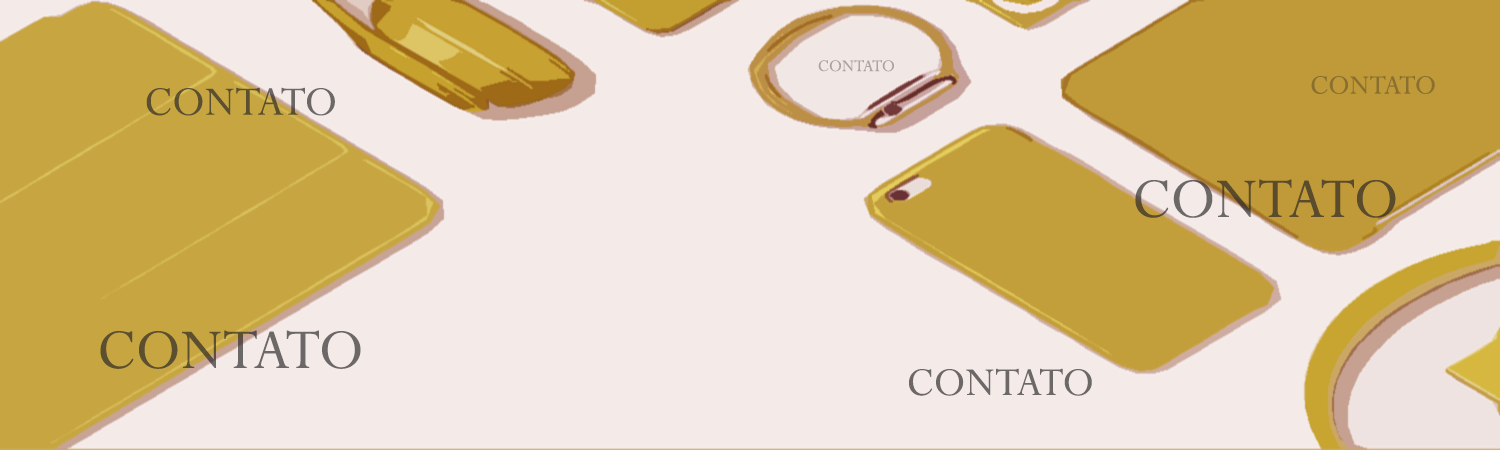
<style>
.page{position:relative;width:1500px;height:450px;background:#f4ebe9}
.page>*{position:absolute;margin:0}
.t1{font:18.1px "Perpetua";color:#aaa3a2}
.t2{font:29.6px "Perpetua";color:#897031}
.t3{font:45.4px "Perpetua"}
.t4{font:62.7px "Perpetua";color:#594b2c}
.t5{font:62.7px "Perpetua"}
.t6{font:44.1px "Perpetua";color:#6b6867}
</style>
<div class="page">
<p class="t1" style="left:818px;top:60px;width:76px;height:12px">CONTATO</p>
<p class="t2" style="left:1311px;top:75px;width:124px;height:19px">CONTATO</p>
<p class="t3" style="left:146px;top:87px;width:189px;height:29px">CONTATO</p>
<p class="t4" style="left:1135px;top:179px;width:261px;height:39px">CONTATO</p>
<p class="t5" style="left:100px;top:330px;width:261px;height:39px">CONTATO</p>
<p class="t6" style="left:909px;top:368px;width:183px;height:28px">CONTATO</p>
</div>
